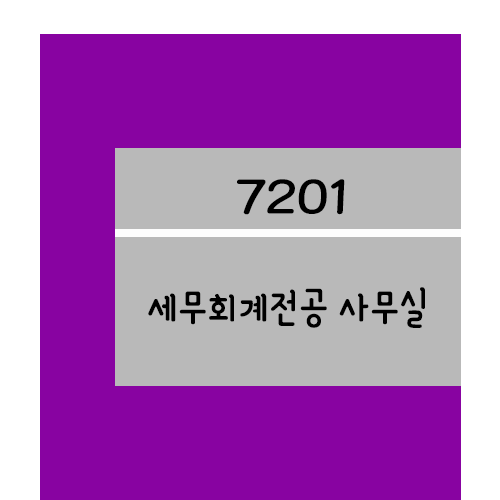
<style>
.page{position:relative;width:500px;height:500px;background:#8803a1}
.page>*{position:absolute;margin:0}
.t1{font:61.2px "YanoljaYacheR";color:#000000;scale:1.18 1}
.t2{font:48px "YanoljaYacheR";color:#000000}
</style>
<div class="page">
<p class="t1" style="left:237px;top:179px;width:108px;height:36px">7201</p>
<p class="t2" style="left:148px;top:287px;width:277px;height:41px">세무회계전공 사무실</p>
</div>
